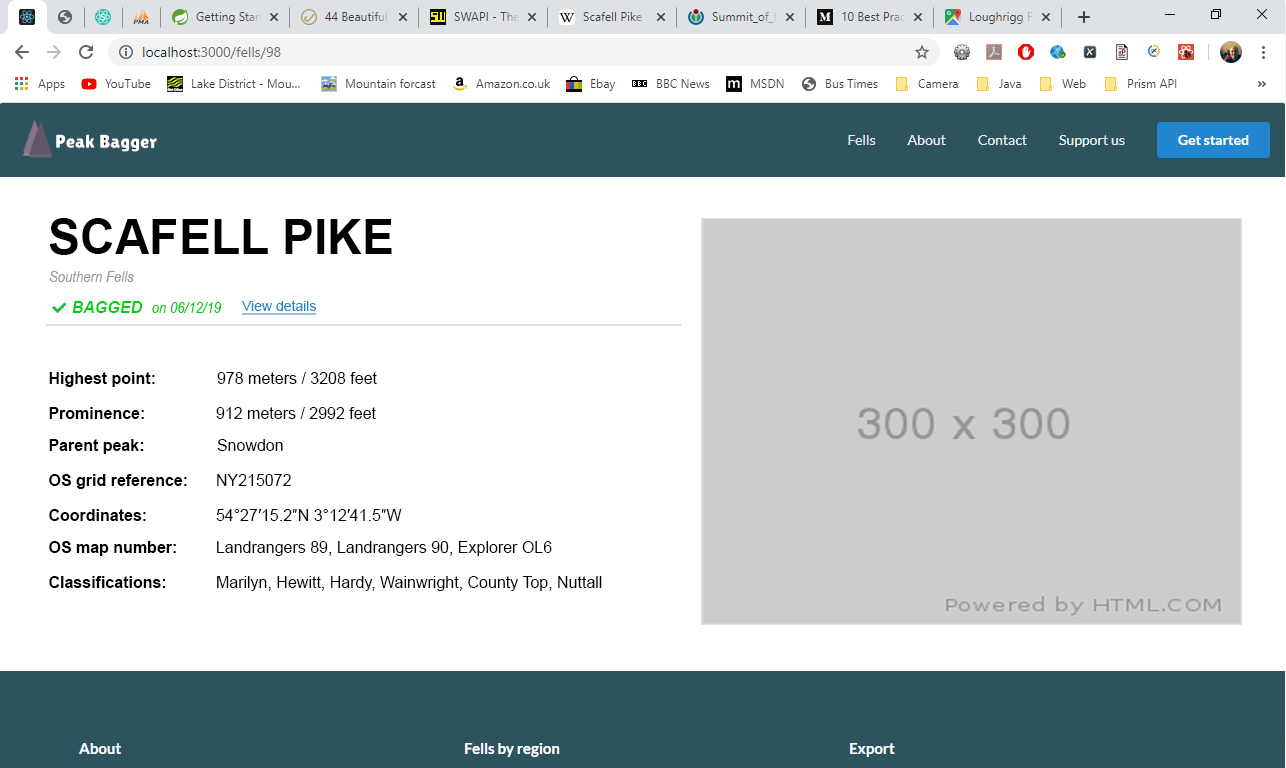
<style>
.page{position:relative;width:1286px;height:768px;background:#ffffff}
.page>*{position:absolute;margin:0}
.t1{font:48px "Arial-BoldMT";color:#000000}
.t2{font:16px "ArialNarrow-Italic";color:#9b9a9a}
.t3{font:16px "Arial-BoldItalicMT";color:#02cd10}
.t4{font:16px "ArialNarrow-Italic";color:#02cd10}
.t5{font:14px "ArialMT";color:#2185d0;text-decoration:underline}
.t6{font:16px "Arial-BoldMT";color:#000000}
.t7{font:16px "ArialMT";color:#000000}
</style>
<div class="page">
<p class="t1" style="left:49px;top:218px;width:343px;height:37px">SCAFELL PIKE</p>
<p class="t2" style="left:49px;top:271px;width:85px;height:11px">Southern Fells</p>
<p class="t3" style="left:72px;top:301px;width:70px;height:12px">BAGGED</p>
<p class="t4" style="left:152px;top:302px;width:70px;height:11px">on 06/12/19</p>
<p class="t5" style="left:241px;top:300px;width:76px;height:15px">View details</p>
<p class="t6" style="left:49px;top:372px;width:106px;height:15px">Highest point:</p>
<p class="t7" style="left:217px;top:372px;width:160px;height:12px">978 meters / 3208 feet</p>
<p class="t6" style="left:49px;top:407px;width:95px;height:12px">Prominence:</p>
<p class="t7" style="left:216px;top:407px;width:160px;height:12px">912 meters / 2992 feet</p>
<p class="t6" style="left:49px;top:439px;width:95px;height:15px">Parent peak:</p>
<p class="t7" style="left:217px;top:439px;width:66px;height:12px">Snowdon</p>
<p class="t6" style="left:49px;top:474px;width:138px;height:15px">OS grid reference:</p>
<p class="t7" style="left:217px;top:474px;width:74px;height:12px">NY215072</p>
<p class="t6" style="left:49px;top:509px;width:97px;height:12px">Coordinates:</p>
<p class="t7" style="left:216px;top:509px;width:186px;height:12px">54°27′15.2″N 3°12′41.5″W</p>
<p class="t6" style="left:49px;top:541px;width:127px;height:15px">OS map number:</p>
<p class="t7" style="left:217px;top:541px;width:335px;height:15px">Landrangers 89, Landrangers 90, Explorer OL6</p>
<p class="t6" style="left:49px;top:576px;width:117px;height:12px">Classifications:</p>
<p class="t7" style="left:217px;top:576px;width:385px;height:15px">Marilyn, Hewitt, Hardy, Wainwright, County Top, Nuttall</p>
</div>
